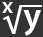
<style>
.page{position:relative;width:43px;height:37px;background:#333333}
.page>*{position:absolute;margin:0}
.t1{font:22.7px "MyriadPro-Semibold";color:#ffffff}
.t2{font:36px "MyriadPro-Semibold";color:#ffffff}
</style>
<div class="page">
<p class="t1" style="left:2px;top:2px;width:11px;height:11px">x</p>
<p class="t2" style="left:23px;top:10px;width:18px;height:26px">y</p>
</div>
